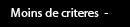
<style>
.page{position:relative;width:130px;height:27px;background:#000000}
.page>*{position:absolute;margin:0}
.t1{font:12px "MyriadPro-Regular";color:#ffffff;scale:1.03 1}
</style>
<div class="page">
<p class="t1" style="left:11px;top:8px;width:97px;height:9px">Moins de criteres  -</p>
</div>
